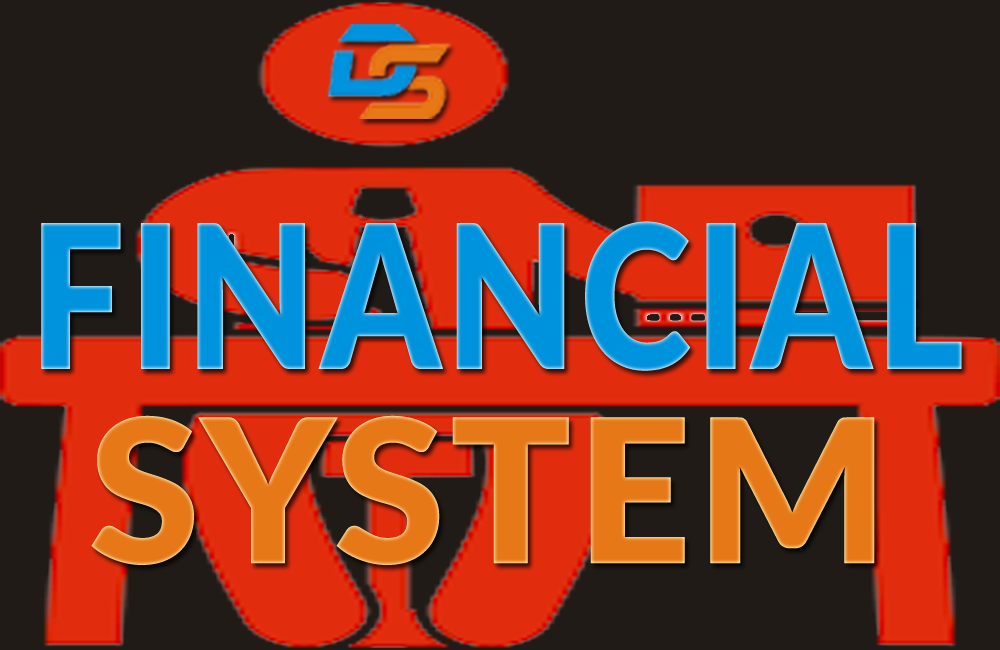
<style>
.page{position:relative;width:1000px;height:650px;background:#201b17}
.page>*{position:absolute;margin:0}
.t1{font:200px "Lato-Black";letter-spacing:0.025em;color:#0093dd;scale:0.84 1}
.t2{font:200px "Lato-Black";letter-spacing:0.025em;color:#e67817}
</style>
<div class="page">
<p class="t1" style="left:41px;top:221px;width:921px;height:150px">FINANCIAL</p>
<p class="t2" style="left:91px;top:415px;width:784px;height:150px">SYSTEM</p>
</div>
